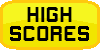
<style>
.page{position:relative;width:100px;height:50px;background:#f1e500}
.page>*{position:absolute;margin:0}
.t1{font:16px "Gameplay";letter-spacing:0.1em;color:#000000;text-transform:uppercase}
</style>
<div class="page">
<p class="t1" style="left:10px;top:7px;width:79px;height:34px;text-align:center">High<br>Scores</p>
</div>
